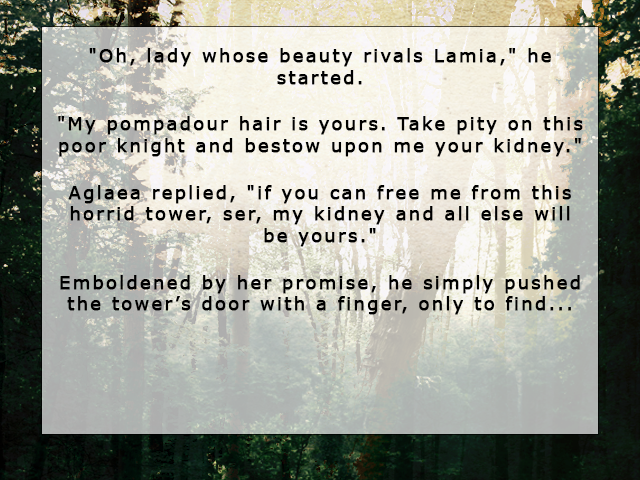
<style>
.page{position:relative;width:640px;height:480px}
.page>*{position:absolute;margin:0}
.t1{font:18px "Verdana";letter-spacing:0.1em;color:#000000;font-weight:bold}
</style>
<div class="page">
<p class="t1" style="left:58px;top:48px;width:525px;height:267px;text-align:center">"Oh, lady whose beauty rivals Lamia," he started. <br><br>"My pompadour hair is yours. Take pity on this poor knight and bestow upon me your kidney."<br><br>Aglaea replied, "if you can free me from this horrid tower, ser, my kidney and all else will be yours." <br><br>Emboldened by her promise, he simply pushed the tower’s door with a finger, only to find...</p>
</div>
